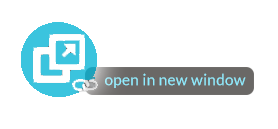
<style>
.page{position:relative;width:278px;height:129px;background:#ffffff}
.page>*{position:absolute;margin:0}
.t1{font:15.1px "Lato-Regular";letter-spacing:0.02em;color:#8cecff}
</style>
<div class="page">
<p class="t1" style="left:105px;top:73px;width:141px;height:15px">open in new window</p>
</div>
